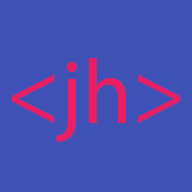
<style>
.page{position:relative;width:192px;height:192px;background:#3f51b5}
.page>*{position:absolute;margin:0}
.t1{font:90.9px "MyriadPro-Regular";color:#e91e63}
</style>
<div class="page">
<p class="t1" style="left:12px;top:58px;width:169px;height:84px">&lt;jh&gt;</p>
</div>
